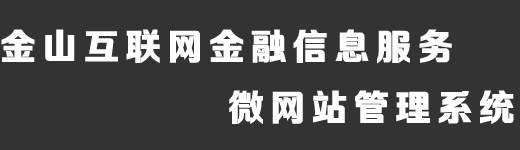
<style>
.page{position:relative;width:520px;height:150px;background:#333333}
.page>*{position:absolute;margin:0}
.t1{font:36px "Tensentype-RuiHeiJ-W6";letter-spacing:0.16em;color:#ffffff}
</style>
<div class="page">
<p class="t1" style="left:1px;top:29px;width:451px;height:35px">金山互联网金融信息服务</p>
<p class="t1" style="left:229px;top:90px;width:285px;height:34px">微网站管理系统</p>
</div>
